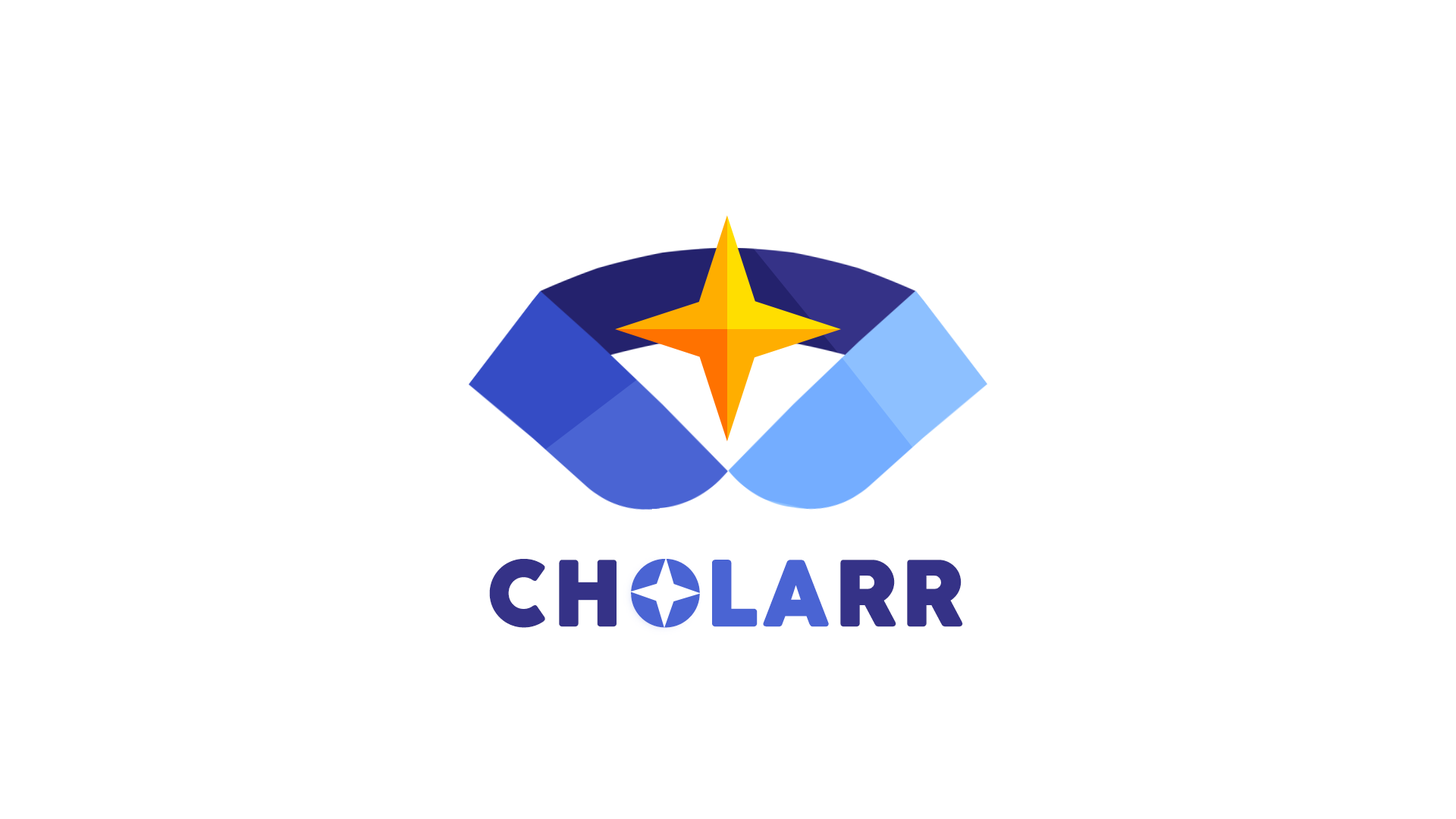
<style>
.page{position:relative;width:1456px;height:819px;background:#ffffff}
.page>*{position:absolute;margin:0}
.t1{font:86.5px "Cocogoose";letter-spacing:0.04em;color:#4a64d3;font-weight:bold}
.t2{font:86.5px "Cocogoose";letter-spacing:0.04em;color:#353287;font-weight:bold}
</style>
<div class="page">
<p class="t1" style="left:489px;top:559px;width:474px;height:69px"><span class="t2">CH</span>OLA<span class="t2">RR</span></p>
</div>
